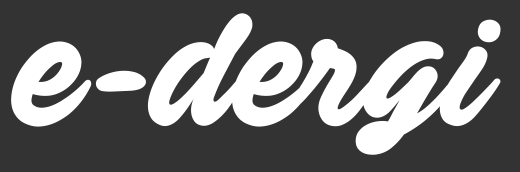
<style>
.page{position:relative;width:520px;height:172px;background:#333333}
.page>*{position:absolute;margin:0}
.t1{font:150px "AveFedanPERSONALUSEONLY";color:#ffffff}
</style>
<div class="page">
<p class="t1" style="left:11px;top:13px;width:490px;height:142px">e-dergi</p>
</div>
